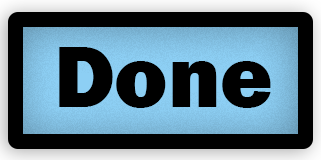
<style>
.page{position:relative;width:321px;height:160px;background:#000000}
.page>*{position:absolute;margin:0}
.t1{font:89.5px "FranklinGothic-Heavy";color:#000000}
</style>
<div class="page">
<p class="t1" style="left:59px;top:47px;width:212px;height:61px">Donee</p>
</div>
